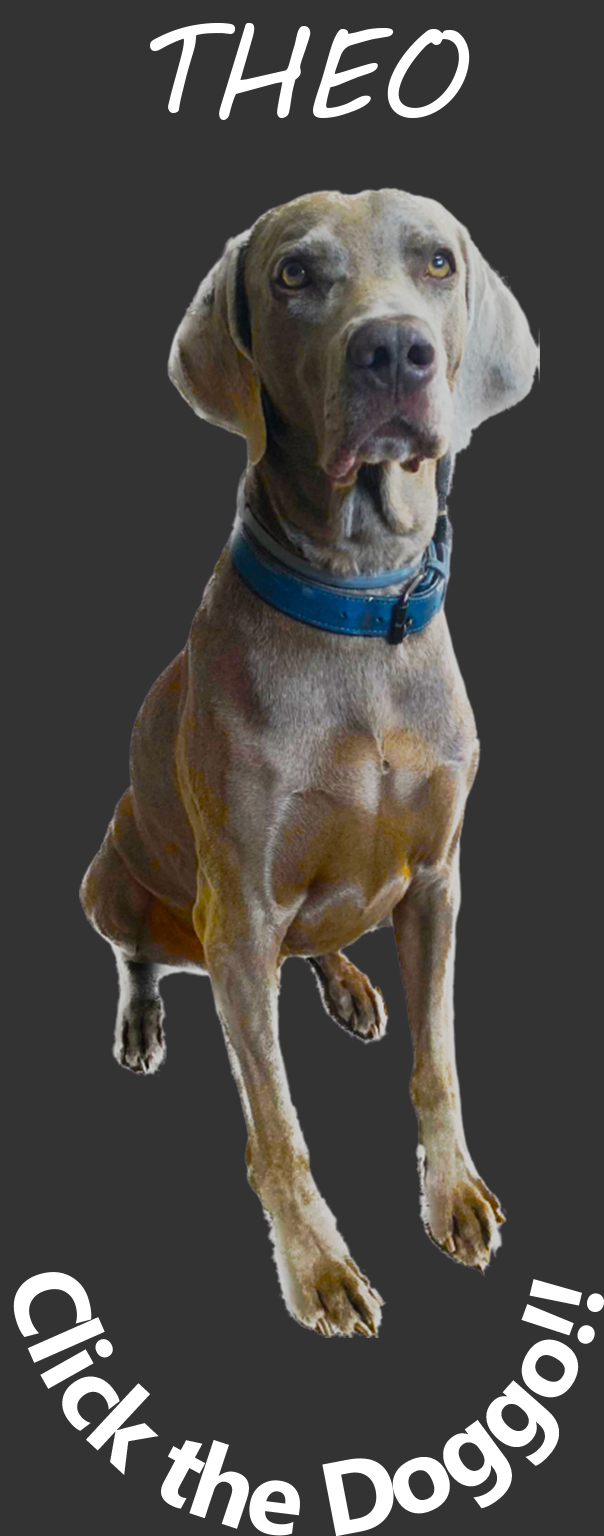
<style>
.page{position:relative;width:604px;height:1536px;background:#333333}
.page>*{position:absolute;margin:0}
.t1{font:125px "MVBoli";color:#ffffff}
.t2{font:104.2px "MicrosoftTaiLe-Bold";color:#ffffff}
</style>
<div class="page">
<p class="t1" style="left:150px;top:23px;width:320px;height:97px">THEO</p>
<p class="t2" style="left:13px;top:1272px;width:591px;height:265px">Click the Doggo!!</p>
</div>
